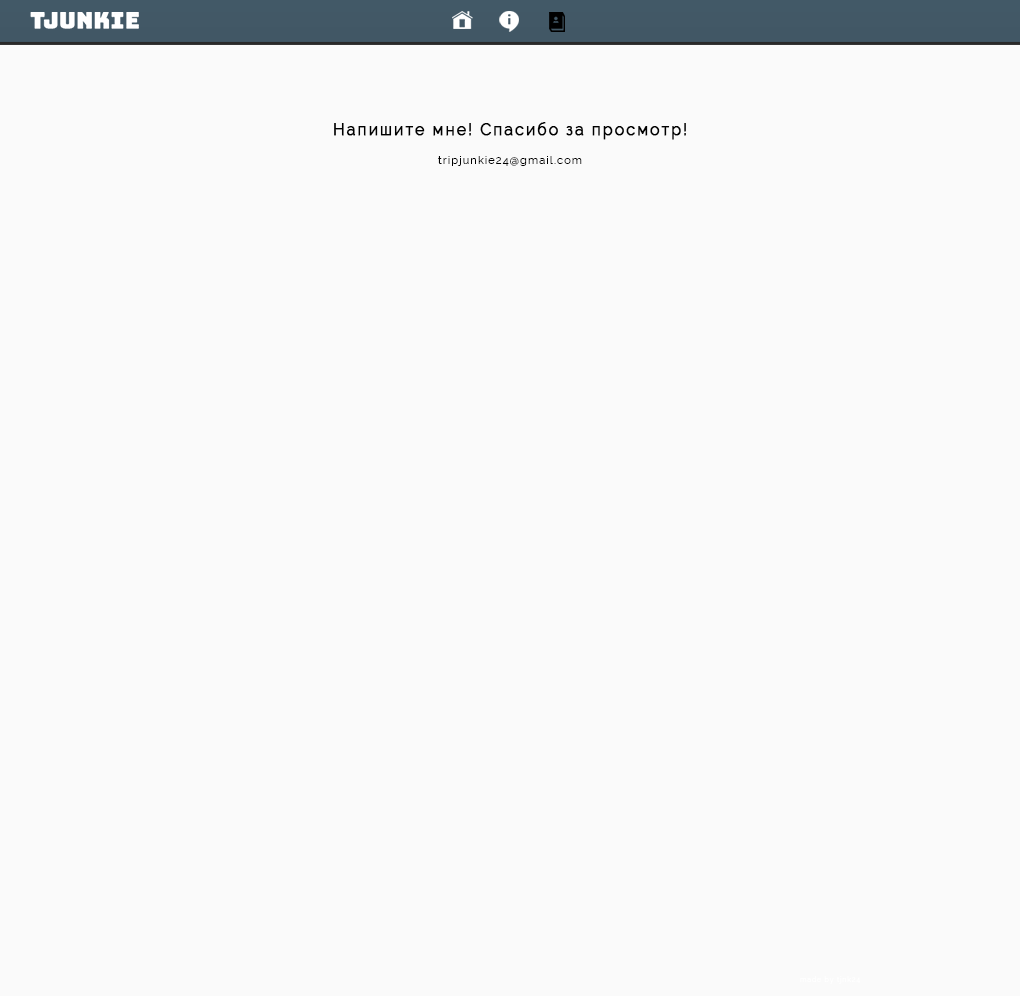
<style>
.page{position:relative;width:1020px;height:996px;background:#fafafa}
.page>*{position:absolute;margin:0}
.t1{font:16px "Raleway-Regular";letter-spacing:0.1em;color:#000000;font-weight:bold}
.t2{font:11px "Raleway-Regular";letter-spacing:0.1em;color:#000000}
</style>
<div class="page">
<p class="t1" style="left:334px;top:122px;width:352px;height:18px">Напишите мне! Спасибо за просмотр!</p>
<p class="t2" style="left:438px;top:156px;width:144px;height:10px">tripjunkie24@gmail.com</p>
</div>
